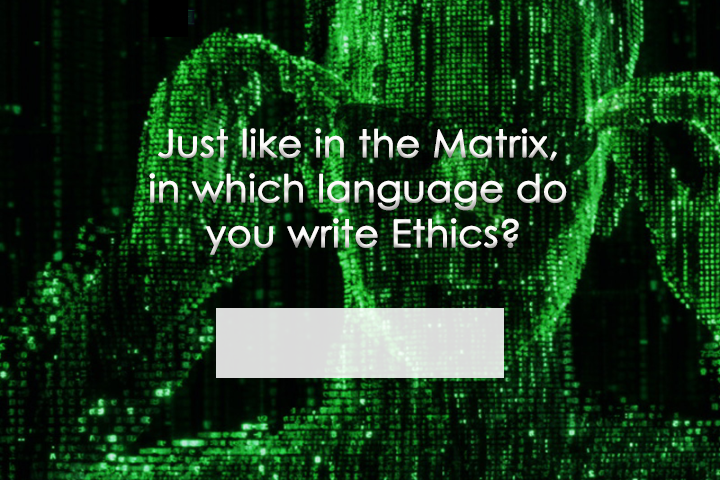
<style>
.page{position:relative;width:720px;height:480px}
.page>*{position:absolute;margin:0}
.t1{font:37.5px "CenturyGothic";color:#fdfbfa;font-weight:bold}
</style>
<div class="page">
<p class="t1" style="left:149px;top:128px;width:418px;height:127px;text-align:center">Just like in the Matrix, <br>in which language do <br>you write Ethics?</p>
</div>
